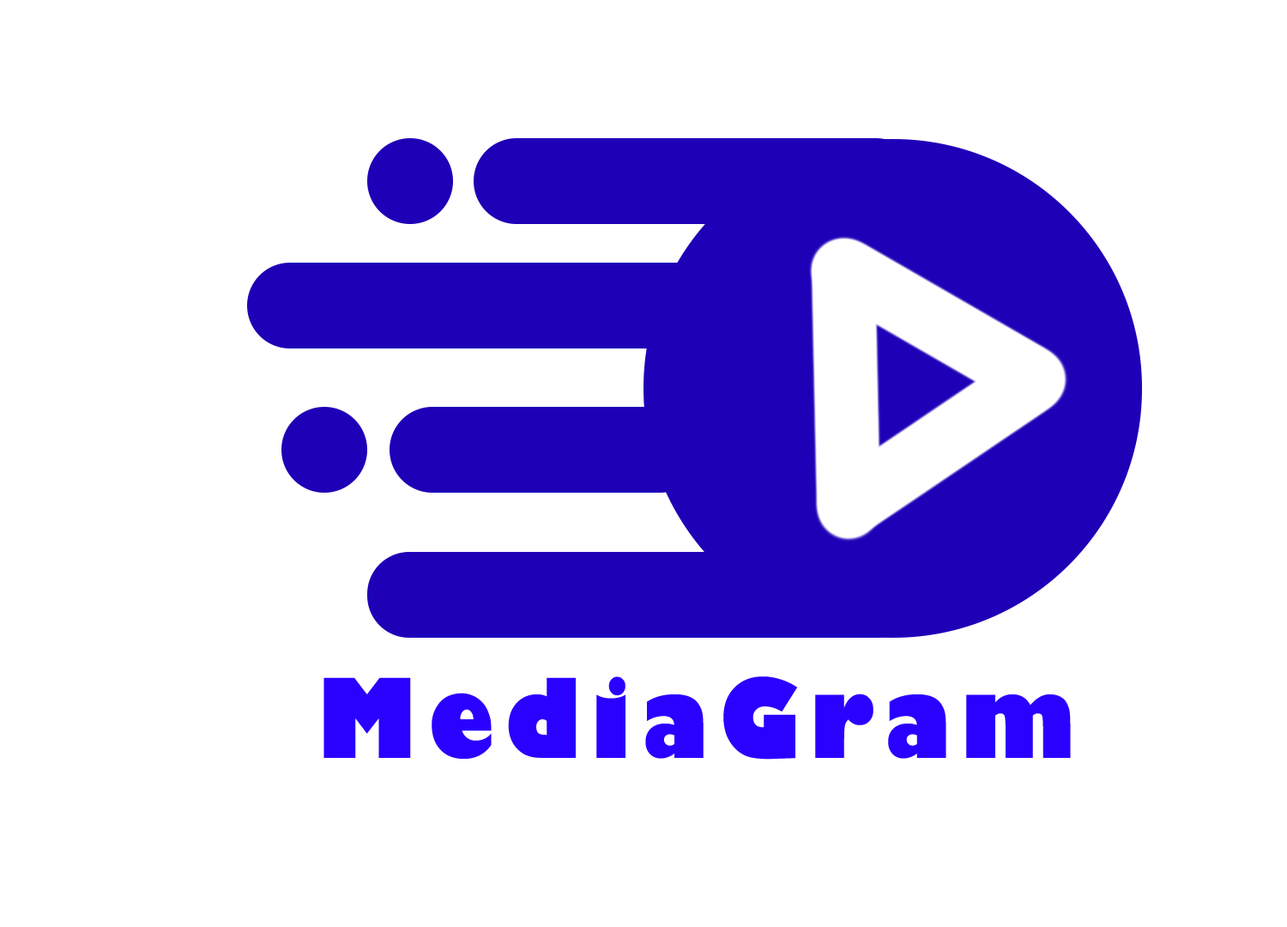
<style>
.page{position:relative;width:1287px;height:927px;background:#ffffff}
.page>*{position:absolute;margin:0}
.t1{font:107.2px "GillSans-UltraBoldCondensed";letter-spacing:0.075em;color:#2a00ff;scale:1.3 1}
</style>
<div class="page">
<p class="t1" style="left:323px;top:676px;width:748px;height:83px">MediaGram</p>
</div>
